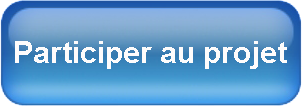
<style>
.page{position:relative;width:302px;height:106px}
.page>*{position:absolute;margin:0}
.t1{font:30px "Arial-BoldMT";color:#fefcfc}
</style>
<div class="page">
<p class="t1" style="left:15px;top:41px;width:272px;height:28px">Participer au projet</p>
</div>
